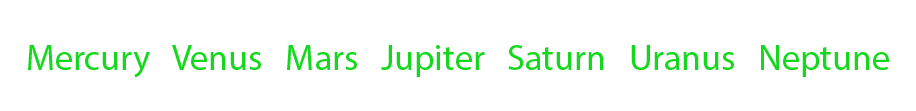
<style>
.page{position:relative;width:916px;height:111px;background:#ffffff}
.page>*{position:absolute;margin:0}
.t1{font:36px "MyriadPro-Regular";color:#15d81e}
</style>
<div class="page">
<p class="t1" style="left:28px;top:45px;width:861px;height:33px">Mercury   Venus   Mars   Jupiter   Saturn   Uranus   Neptune</p>
</div>
